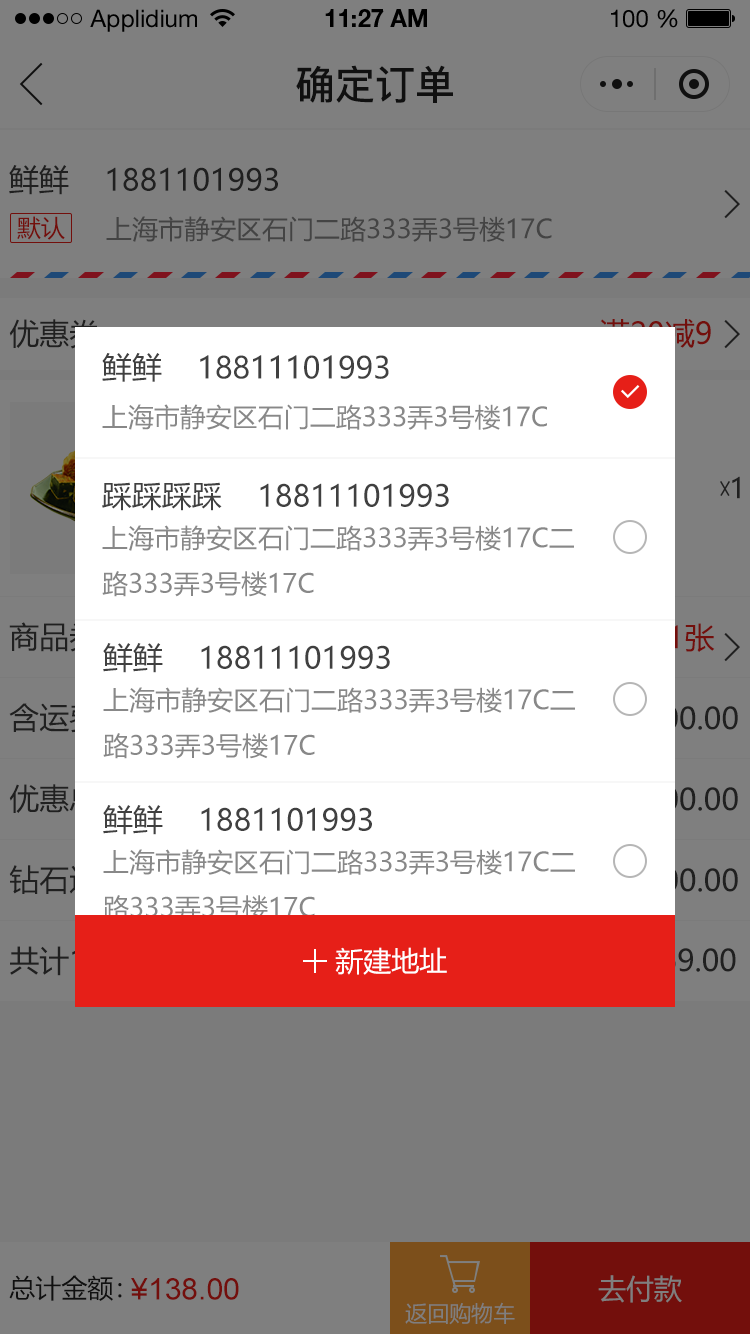
<style>
.page{position:relative;width:750px;height:1334px;background:#7f7f7f}
.page>*{position:absolute;margin:0}
.t1{font:24px "HelveticaNeueLTStd-Roman";color:#000000}
.t2{font:24px "HelveticaNeueLTStd-Bd";color:#000000}
.t3{font:40px "PingFang-SC-Bold";color:#202020;text-transform:uppercase}
.t4{font:30px "MicrosoftYaHei";color:#202020;text-transform:uppercase}
.t5{font:24px "MicrosoftYaHei";color:#730f0c;text-transform:uppercase}
.t6{font:26px "MicrosoftYaHei";color:#444444;text-transform:uppercase}
.t7{font:30.1px "MicrosoftYaHei";color:#404040;text-transform:uppercase}
.t8{font:26.1px "MicrosoftYaHei";color:#888888;text-transform:uppercase}
.t9{font:30px "MicrosoftYaHei";color:#404040;text-transform:uppercase}
.t10{font:28px "MicrosoftYaHei";color:#202020;text-transform:uppercase}
.t11{font:26px "MicrosoftYaHei";color:#888888;text-transform:uppercase}
.t12{font:30px "MicrosoftYaHei";color:#730f0c;text-transform:uppercase}
.t13{font:30px "MicrosoftYaHei";text-transform:uppercase}
.t14{font:28px "MicrosoftYaHei";color:#ffffff;text-transform:uppercase}
.t15{font:26px "MicrosoftYaHei";color:#202020;text-transform:uppercase}
.t16{font:30px "ArialMT";color:#730f0c;text-transform:uppercase}
.t17{font:28px "MicrosoftYaHei";color:#7f7f7f;text-transform:uppercase}
.t18{font:22px "MicrosoftYaHei";color:#7f7f7f;text-transform:uppercase}
</style>
<div class="page">
<p class="t1" style="left:90px;top:9px;width:107px;height:23px">Applidium</p>
<p class="t2" style="left:325px;top:9px;width:102px;height:18px">11:27 AM</p>
<p class="t1" style="left:611px;top:9px;width:67px;height:19px">100 %</p>
<p class="t3" style="left:296px;top:65px;width:157px;height:38px">确定订单</p>
<p class="t4" style="left:9px;top:165px;width:60px;height:30px">鲜鲜</p>
<p class="t4" style="left:107px;top:167px;width:171px;height:24px">1881101993</p>
<p class="t5" style="left:17px;top:216px;width:48px;height:24px">默认</p>
<p class="t6" style="left:106px;top:216px;width:446px;height:26px">上海市静安区石门二路333弄3号楼17c</p>
<p class="t4" style="left:9px;top:319px;width:90px;height:30px">优惠券</p>
<p class="t7" style="left:102px;top:353px;width:60px;height:29px">鲜鲜</p>
<p class="t7" style="left:200px;top:355px;width:189px;height:24px">18811101993</p>
<p class="t8" style="left:102px;top:404px;width:445px;height:26px">上海市静安区石门二路333弄3号楼17c</p>
<p class="t9" style="left:102px;top:482px;width:120px;height:29px">踩踩踩踩</p>
<p class="t9" style="left:260px;top:483px;width:189px;height:24px">18811101993</p>
<p class="t10" style="left:732px;top:476px;width:8px;height:23px">1</p>
<p class="t11" style="left:102px;top:525px;width:472px;height:72px">上海市静安区石门二路333弄3号楼17c二<br>路333弄3号楼17c</p>
<p class="t12" style="left:669px;top:623px;width:46px;height:29px">1张</p>
<p class="t9" style="left:103px;top:643px;width:60px;height:30px">鲜鲜</p>
<p class="t9" style="left:201px;top:645px;width:189px;height:24px">18811101993</p>
<p class="t11" style="left:103px;top:687px;width:472px;height:72px">上海市静安区石门二路333弄3号楼17c二<br>路333弄3号楼17c</p>
<p class="t9" style="left:103px;top:805px;width:60px;height:30px">鲜鲜</p>
<p class="t9" style="left:201px;top:807px;width:171px;height:24px">1881101993</p>
<p class="t11" style="left:103px;top:849px;width:472px;height:72px">上海市静安区石门二路333弄3号楼17c二<br>路333弄3号楼17c</p>
<p class="t13" style="left:10px;top:946px;width:165px;height:30px">共计1件商品</p>
<p class="t14" style="left:335px;top:947px;width:112px;height:28px">新建地址</p>
<p class="t15" style="left:9px;top:1275px;width:113px;height:26px">总计金额：</p>
<p class="t16" style="left:131px;top:1278px;width:108px;height:22px">¥138.00</p>
<p class="t17" style="left:598px;top:1275px;width:84px;height:28px">去付款</p>
<p class="t18" style="left:405px;top:1302px;width:110px;height:23px">返回购物车</p>
</div>
